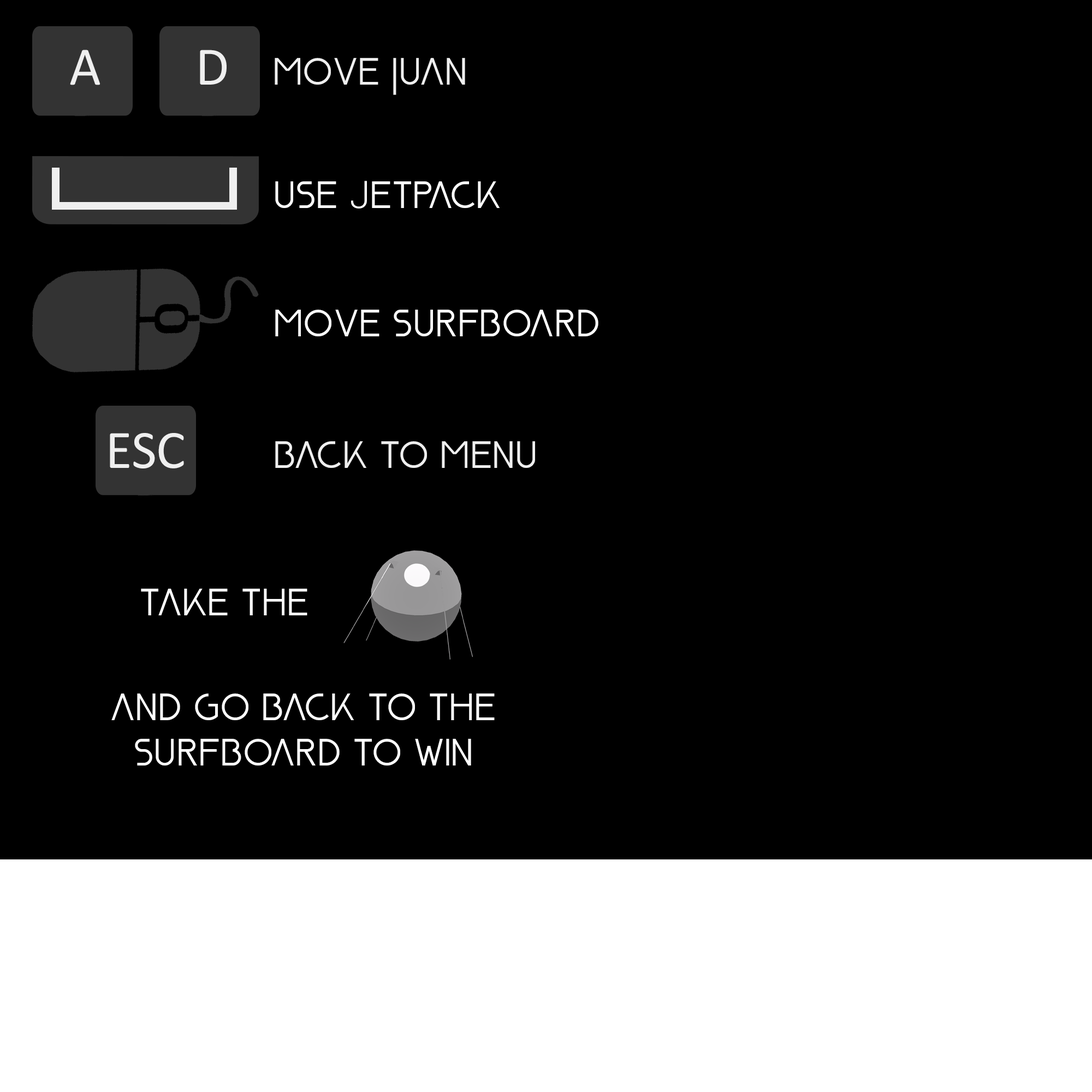
<style>
.page{position:relative;width:1092px;height:1092px;background:#000000}
.page>*{position:absolute;margin:0}
.t1{font:54.6px "Calibri";color:#efefef}
.t2{font:37.9px "Nasa21";color:#efefef}
.t3{font:37.9px "Nasa21";color:#ffffff}
.t4{font:37.9px "Roboto-Light";color:#ffffff}
</style>
<div class="page">
<p class="t1" style="left:70px;top:50px;width:30px;height:35px">A</p>
<p class="t1" style="left:200px;top:50px;width:27px;height:35px">D</p>
<p class="t2" style="left:275px;top:58px;width:190px;height:37px">MOVE JUAN</p>
<p class="t3" style="left:275px;top:181px;width:225px;height:28px">USE <span class="t4">J</span>ETPACK</p>
<p class="t3" style="left:275px;top:310px;width:323px;height:26px">MOVE SURFBOARD</p>
<p class="t1" style="left:110px;top:433px;width:74px;height:35px">ESC</p>
<p class="t2" style="left:275px;top:441px;width:260px;height:27px">BACK TO MENU</p>
<p class="t3" style="left:141px;top:589px;width:166px;height:26px">TAKE THE</p>
<p class="t3" style="left:111px;top:693px;width:384px;height:72px;text-align:center">AND GO BACK TO THE <br>SURFBOARD TO WIN</p>
</div>
